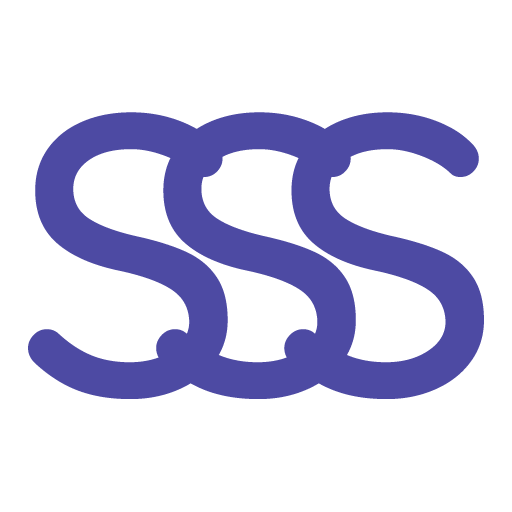
<style>
.page{position:relative;width:512px;height:512px;background:#ffffff}
.page>*{position:absolute;margin:0}
.t1{font:398px "Quicksand-Medium";color:#4d4aa3}
</style>
<div class="page">
<p class="t1" style="left:28px;top:112px;width:456px;height:287px">SSS</p>
</div>
